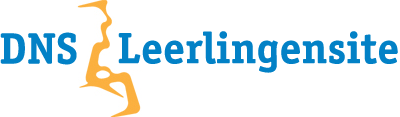
<style>
.page{position:relative;width:400px;height:117px;background:#ffffff}
.page>*{position:absolute;margin:0}
.t1{font:44px "OfficinaSerifStd-Bold";color:#0281c6}
</style>
<div class="page">
<p class="t1" style="left:0px;top:32px;width:77px;height:33px">DNS</p>
<p class="t1" style="left:118px;top:31px;width:280px;height:42px">Leerlingensite</p>
</div>
